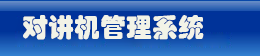
<style>
.page{position:relative;width:260px;height:56px}
.page>*{position:absolute;margin:0}
.t1{font:26px "STHupo";color:#f2f3e7}
</style>
<div class="page">
<p class="t1" style="left:23px;top:15px;width:181px;height:25px">对讲机管理系统</p>
</div>
